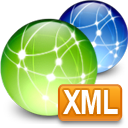
<style>
.page{position:relative;width:128px;height:128px;background:#ffffff}
.page>*{position:absolute;margin:0}
.t1{font:33.3px "Arial-BoldMT";letter-spacing:-0.04em;color:#ffffff;scale:0.82 1}
</style>
<div class="page">
<p class="t1" style="left:63px;top:90px;width:55px;height:24px">XML</p>
</div>
